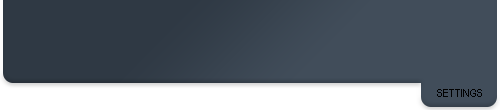
<style>
.page{position:relative;width:500px;height:110px;background:#414d5a}
.page>*{position:absolute;margin:0}
.t1{font:11px "ArialNarrow";color:#010101}
</style>
<div class="page">
<p class="t1" style="left:437px;top:89px;width:45px;height:8px">SETTINGS</p>
</div>
